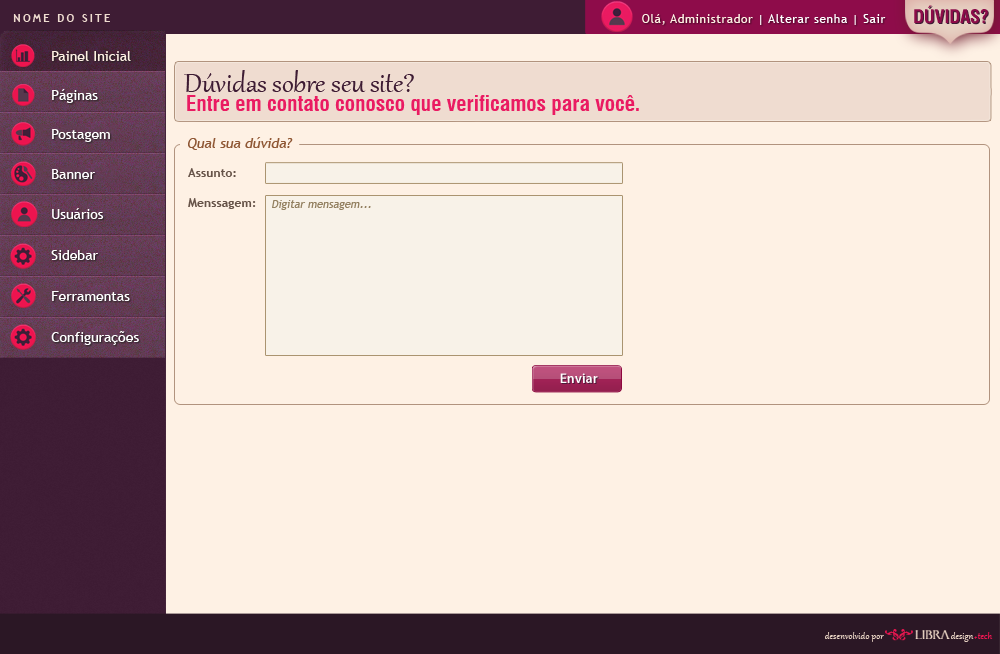
<style>
.page{position:relative;width:1000px;height:654px;background:#fef1e4}
.page>*{position:absolute;margin:0}
.t1{font:18.3px "Swiss721BT-BoldCondensed";letter-spacing:-0.005em;color:#8d0c49}
.t2{font:11px "TrebuchetMS-Bold";letter-spacing:0.2em;color:#efdcd0;text-transform:uppercase}
.t3{font:12px "TrebuchetMS";letter-spacing:0.05em;color:#ffffff}
.t4{font:12px "TrebuchetMS";letter-spacing:0.05em;color:#fef1e4}
.t5{font:14px "TrebuchetMS";color:#fef1e4}
.t6{font:21.4px/19px "Swiss721BT-BoldCondensed";color:#ea1b62}
.t7{font:32.5px/19px "Gabriola";color:#3e1c34}
.t8{font:14px "TrebuchetMS";color:#ffffff}
.t9{font:14px "TrebuchetMS";color:#8f5734;font-style:italic}
.t10{font:12px "TrebuchetMS-Bold";letter-spacing:0.01em;color:#665348}
.t11{font:11px "TrebuchetMS";color:#938060;font-style:italic}
.t12{font:14px "MyriadPro-Semibold";color:#fefefe}
.t13{font:11.2px "Gabriola";letter-spacing:0.005em;color:#e7d2c2}
.t14{font:7.5px "Gabriola";letter-spacing:0.005em;color:#ed1651}
.t15{font:11.2px "Gabriola";letter-spacing:0.005em;color:#ed1651}
</style>
<div class="page">
<p class="t1" style="left:914px;top:5px;width:74px;height:19px">DÚVIDAS?</p>
<p class="t2" style="left:13px;top:14px;width:97px;height:8px">Nome do site</p>
<p class="t3" style="left:642px;top:14px;width:244px;height:11px"><span class="t4">Olá, Administrador </span>| Alterar senha | Sair</p>
<p class="t5" style="left:52px;top:51px;width:79px;height:10px">Painel Inicial</p>
<p class="t6" style="left:184px;top:70px;width:455px;height:45px"><span class="t7">Dúvidas sobre seu site?<br></span>Entre em contato conosco que verificamos para você.</p>
<p class="t8" style="left:52px;top:89px;width:46px;height:14px">Páginas</p>
<p class="t8" style="left:52px;top:129px;width:58px;height:13px">Postagem</p>
<p class="t9" style="left:188px;top:137px;width:105px;height:13px">Qual sua dúvida?</p>
<p class="t8" style="left:52px;top:169px;width:43px;height:10px">Banner</p>
<p class="t10" style="left:188px;top:168px;width:48px;height:9px">Assunto:</p>
<p class="t10" style="left:188px;top:198px;width:68px;height:11px">Menssagem:</p>
<p class="t8" style="left:52px;top:208px;width:52px;height:11px">Usuários</p>
<p class="t11" style="left:272px;top:200px;width:99px;height:10px">Digitar mensagem...</p>
<p class="t8" style="left:51px;top:250px;width:47px;height:10px">Sidebar</p>
<p class="t8" style="left:52px;top:291px;width:78px;height:10px">Ferramentas</p>
<p class="t8" style="left:51px;top:331px;width:88px;height:14px">Configurações</p>
<p class="t12" style="left:560px;top:373px;width:38px;height:10px">Enviar</p>
<p class="t13" style="left:825px;top:632px;width:59px;height:10px">desenvolvido por</p>
<p class="t13" style="left:951px;top:632px;width:42px;height:10px">design <span class="t14">+ </span><span class="t15">tech</span></p>
</div>
